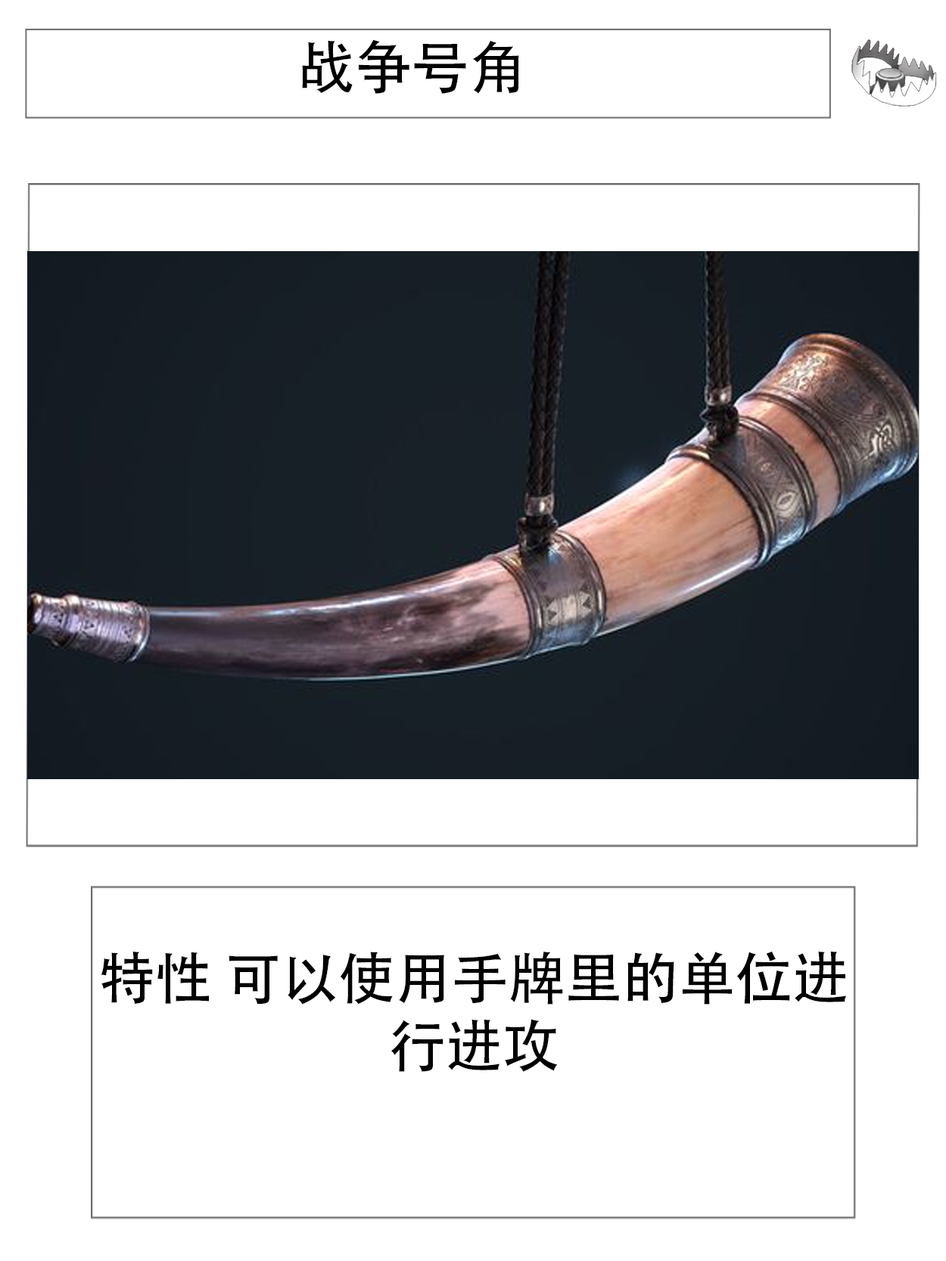
<style>
.page{position:relative;width:946px;height:1261px;background:#ffffff}
.page>*{position:absolute;margin:0}
.t1{font:56.7px "AdobeHeitiStd-Regular";color:#000000}
</style>
<div class="page">
<p class="t1" style="left:302px;top:39px;width:217px;height:55px">战争号角</p>
<p class="t1" style="left:101px;top:951px;width:745px;height:121px;text-align:center">特性 可以使用手牌里的单位进行进攻</p>
</div>
